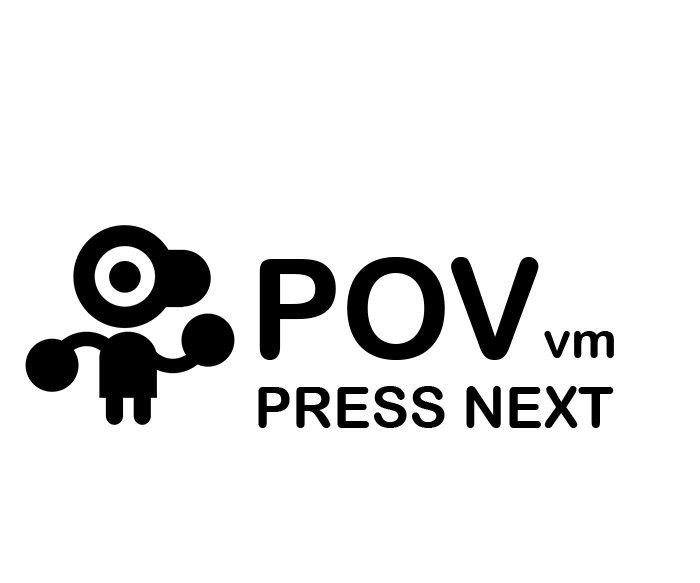
<style>
.page{position:relative;width:700px;height:583px;background:#ffffff}
.page>*{position:absolute;margin:0}
.t1{font:138.6px "ArialRoundedMTBold";color:#000000}
.t2{font:52px "ArialRoundedMTBold";color:#000000}
.t3{font:57.3px "ArialRoundedMTBold";color:#000000}
</style>
<div class="page">
<p class="t1" style="left:259px;top:257px;width:355px;height:103px">POV<span class="t2">vm</span></p>
<p class="t3" style="left:258px;top:386px;width:356px;height:42px">PRESS NEXT</p>
</div>
